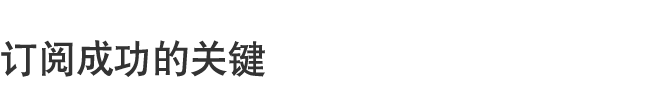
<style>
.page{position:relative;width:660px;height:96px;background:#ffffff}
.page>*{position:absolute;margin:0}
.t1{font:38px "HeitiCSEG-Medium-GB";color:#333333}
</style>
<div class="page">
<p class="t1" style="left:1px;top:40px;width:264px;height:37px">订阅成功的关键</p>
</div>
